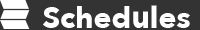
<style>
.page{position:relative;width:200px;height:30px;background:#333333}
.page>*{position:absolute;margin:0}
.t1{font:30px "AvenirNext-Bold";color:#ffffff}
</style>
<div class="page">
<p class="t1" style="left:43px;top:5px;width:147px;height:23px">Schedules</p>
</div>
